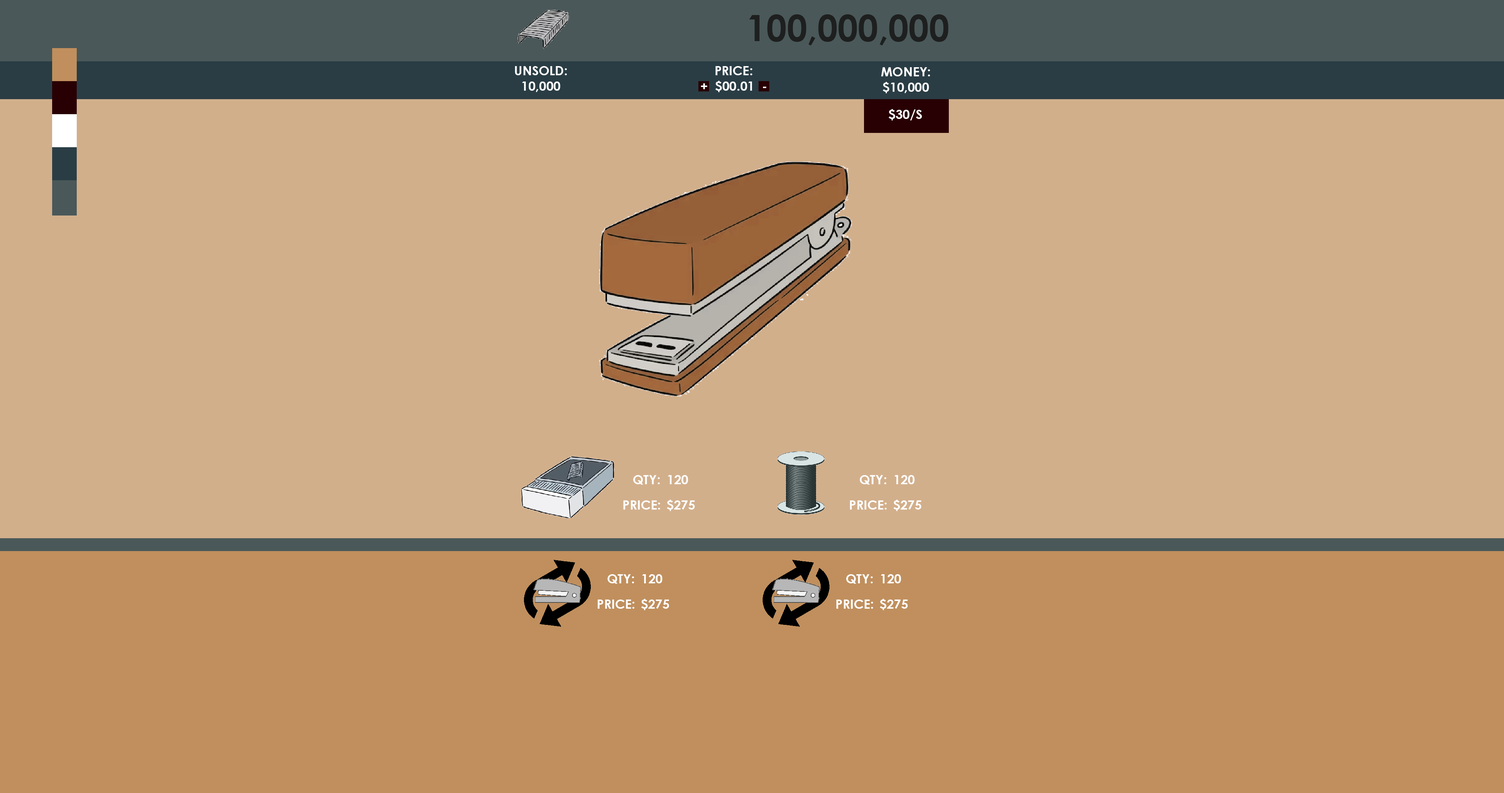
<style>
.page{position:relative;width:1504px;height:793px;background:#d2af8b}
.page>*{position:absolute;margin:0}
.t1{font:36.3px "CenturyGothic-Bold";color:#1e1f1f}
.t2{font:12.8px "CenturyGothic-Bold";color:#ffffff}
</style>
<div class="page">
<p class="t1" style="left:749px;top:14px;width:199px;height:32px">100,000,000</p>
<p class="t2" style="left:515px;top:66px;width:52px;height:26px;text-align:center">UNSOLD:<br>10,000</p>
<p class="t2" style="left:701px;top:66px;width:65px;height:26px;text-align:center">PRICE:<br>+  $00.01  -</p>
<p class="t2" style="left:881px;top:67px;width:49px;height:26px;text-align:center">MONEY:<br>$10,000</p>
<p class="t2" style="left:888px;top:109px;width:34px;height:11px">$30/S</p>
<p class="t2" style="left:633px;top:475px;width:27px;height:10px">QTY:</p>
<p class="t2" style="left:668px;top:475px;width:20px;height:9px">120</p>
<p class="t2" style="left:859px;top:475px;width:27px;height:10px">QTY:</p>
<p class="t2" style="left:894px;top:475px;width:21px;height:9px">120</p>
<p class="t2" style="left:623px;top:500px;width:37px;height:10px">PRICE:</p>
<p class="t2" style="left:667px;top:500px;width:28px;height:11px">$275</p>
<p class="t2" style="left:850px;top:500px;width:37px;height:10px">PRICE:</p>
<p class="t2" style="left:893px;top:500px;width:28px;height:11px">$275</p>
<p class="t2" style="left:607px;top:574px;width:27px;height:10px">QTY:</p>
<p class="t2" style="left:642px;top:574px;width:20px;height:9px">120</p>
<p class="t2" style="left:846px;top:574px;width:27px;height:10px">QTY:</p>
<p class="t2" style="left:881px;top:574px;width:20px;height:9px">120</p>
<p class="t2" style="left:597px;top:600px;width:37px;height:9px">PRICE:</p>
<p class="t2" style="left:641px;top:599px;width:28px;height:11px">$275</p>
<p class="t2" style="left:836px;top:600px;width:37px;height:9px">PRICE:</p>
<p class="t2" style="left:880px;top:599px;width:28px;height:11px">$275</p>
</div>
